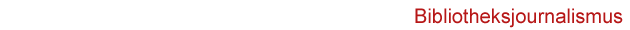
<style>
.page{position:relative;width:630px;height:30px;background:#ffffff}
.page>*{position:absolute;margin:0}
.t1{font:20px "ArialMT";color:#b61717}
.t2{font:18px "ArialMT";color:#b61717}
</style>
<div class="page">
<p class="t1" style="left:415px;top:8px;width:208px;height:20px"><span class="t2">                            </span>Bibliotheksjournalismus</p>
</div>
